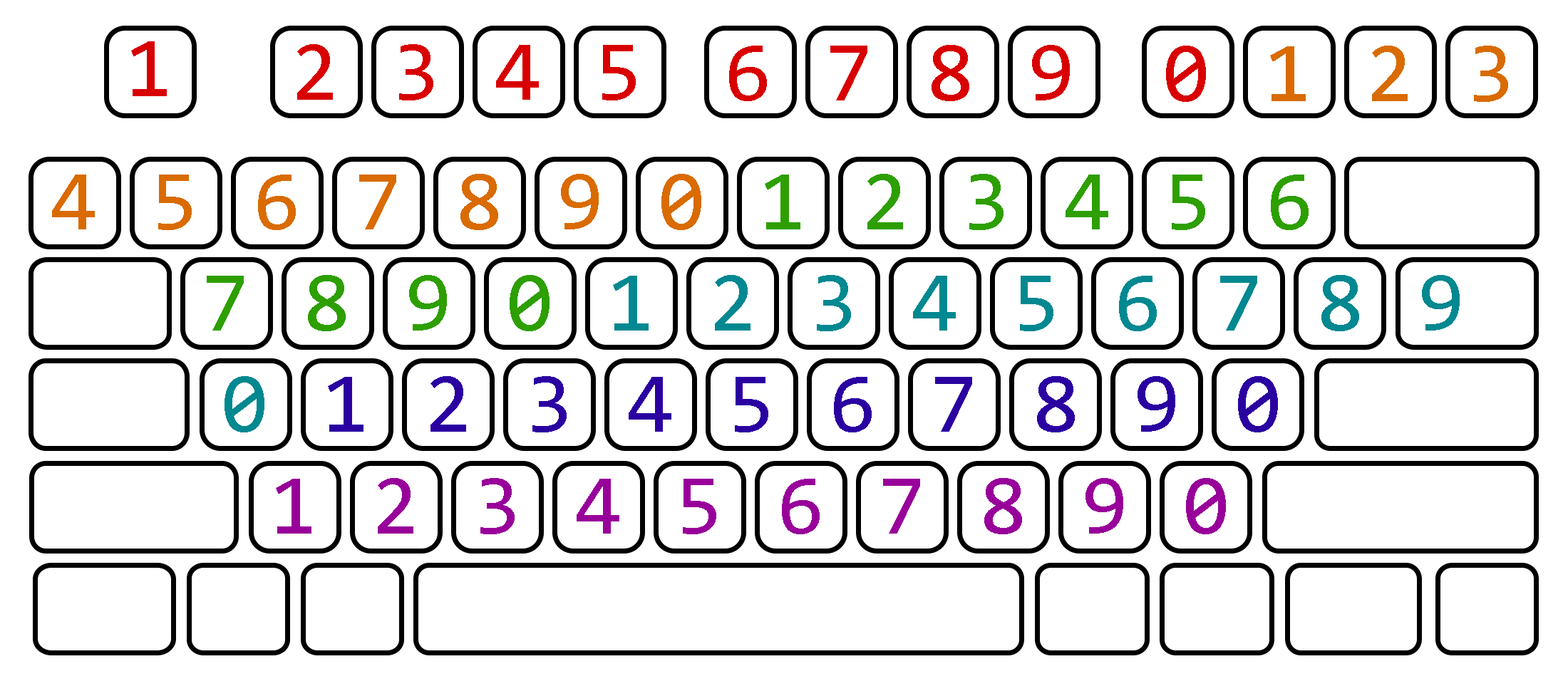
<style>
.page{position:relative;width:1568px;height:691px;background:#ffffff}
.page>*{position:absolute;margin:0}
.t1{font:85.8px "Consolas";letter-spacing:0.635em;color:#d80000;text-transform:uppercase}
.t2{font:85.5px "Consolas";letter-spacing:0.635em;color:#d80000;text-transform:uppercase}
.t3{font:85.5px "Consolas";letter-spacing:0.635em;color:#d96b00;text-transform:uppercase}
.t4{font:85.5px "Consolas";letter-spacing:0.635em;color:#2d9f00;text-transform:uppercase}
.t5{font:85.5px "Consolas";letter-spacing:0.635em;color:#018890;text-transform:uppercase}
.t6{font:85.5px "Consolas";letter-spacing:0.635em;color:#2a00a1;text-transform:uppercase}
.t7{font:85.5px "Consolas";letter-spacing:0.635em;color:#98009a;text-transform:uppercase}
</style>
<div class="page">
<p class="t1" style="left:131px;top:41px;width:36px;height:55px">1</p>
<p class="t2" style="left:297px;top:44px;width:339px;height:56px">2345</p>
<p class="t2" style="left:729px;top:45px;width:341px;height:56px">6789</p>
<p class="t3" style="left:1166px;top:46px;width:342px;height:56px"><span class="t2">0</span>123</p>
<p class="t3" style="left:52px;top:174px;width:1257px;height:56px">4567890<span class="t4">123456</span></p>
<p class="t5" style="left:207px;top:275px;width:1253px;height:56px"><span class="t4">7890</span>123456789</p>
<p class="t6" style="left:225px;top:376px;width:1053px;height:57px"><span class="t5">0</span>1234567890</p>
<p class="t7" style="left:276px;top:478px;width:950px;height:57px">1234567890</p>
</div>
